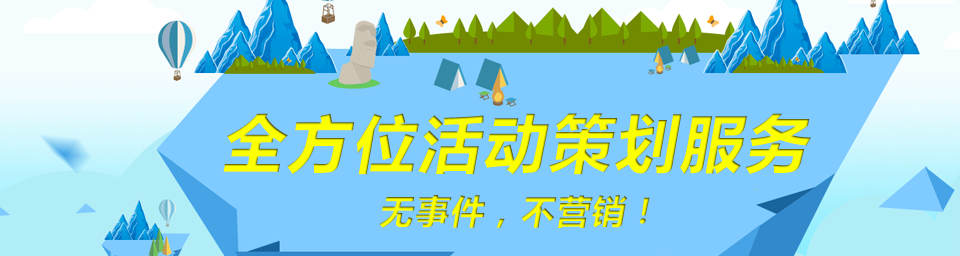
<style>
.page{position:relative;width:960px;height:256px;background:#7fcaff}
.page>*{position:absolute;margin:0}
.t1{font:62.4px "MicrosoftYaHei-Bold";letter-spacing:0.05em;color:#fcff00;font-style:italic}
.t2{font:33.9px "MicrosoftYaHei-Bold";letter-spacing:0.05em;font-style:italic}
</style>
<div class="page">
<p class="t1" style="left:223px;top:113px;width:588px;height:62px">全方位活动策划服务</p>
<p class="t2" style="left:379px;top:195px;width:271px;height:33px">无事件，不营销！</p>
</div>
